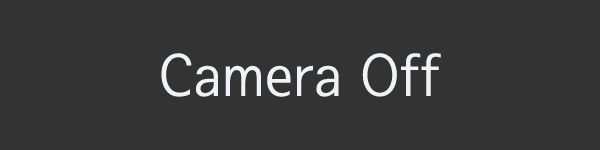
<style>
.page{position:relative;width:600px;height:150px;background:#333333}
.page>*{position:absolute;margin:0}
.t1{font:60px "SeN-CM";color:#eff3f6}
</style>
<div class="page">
<p class="t1" style="left:161px;top:53px;width:280px;height:44px">Camera Off</p>
</div>
